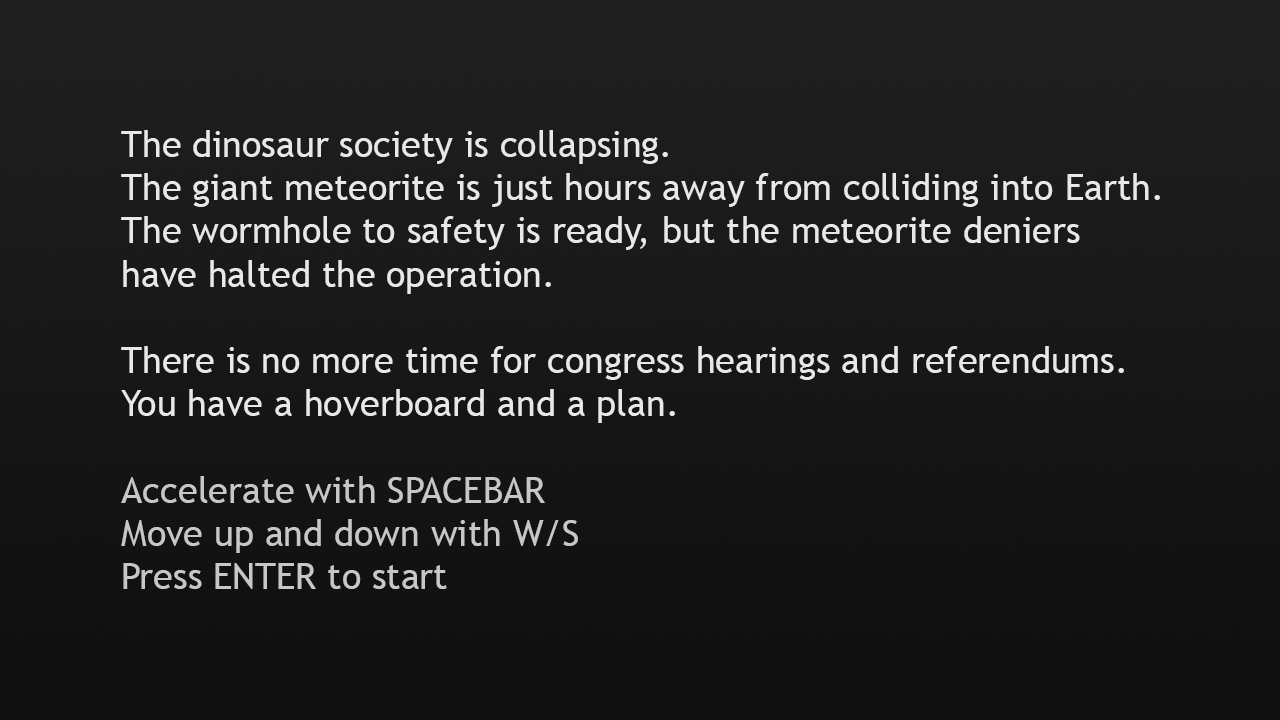
<style>
.page{position:relative;width:1280px;height:720px}
.page>*{position:absolute;margin:0}
.t1{font:36px "TrebuchetMS";color:#e8e8e8}
.t2{font:36px "TrebuchetMS";color:#c7c7c7}
</style>
<div class="page">
<p class="t1" style="left:121px;top:130px;width:1039px;height:459px">The dinosaur society is collapsing.<br>The giant meteorite is just hours away from colliding into Earth.<br>The wormhole to safety is ready, but the meteorite deniers <br>have halted the operation.<br><br>There is no more time for congress hearings and referendums.<br>You have a hoverboard and a plan.<br><br><span class="t2">Accelerate with SPACEBAR<br>Move up and down with W/S<br>Press ENTER to start</span></p>
</div>
